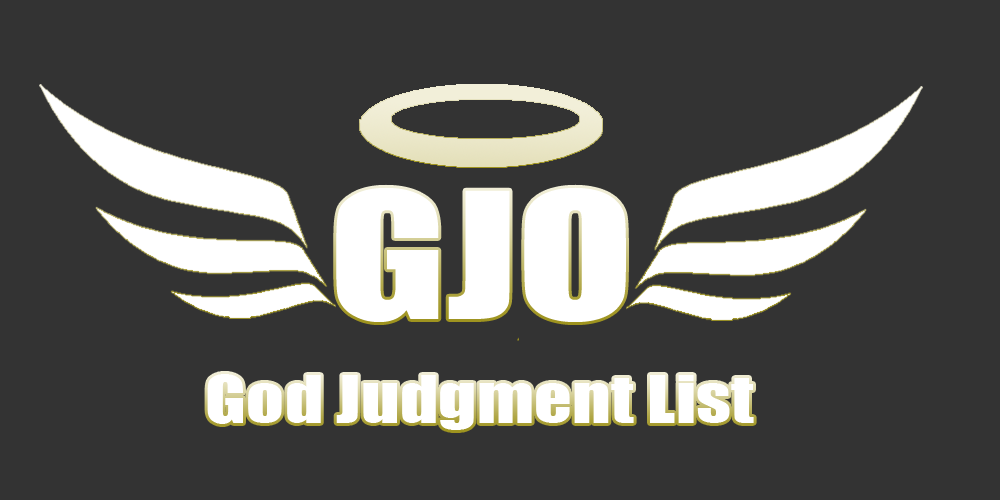
<style>
.page{position:relative;width:1000px;height:500px;background:#333333}
.page>*{position:absolute;margin:0}
.t1{font:161.8px "Impact";color:#ffffff;scale:1.32 1}
.t2{font:60.8px "Impact";color:#ffffff;scale:1.22 1}
</style>
<div class="page">
<p class="t1" style="left:336px;top:187px;width:290px;height:135px">GJO</p>
<p class="t2" style="left:207px;top:374px;width:547px;height:56px">God Judgment List</p>
</div>
